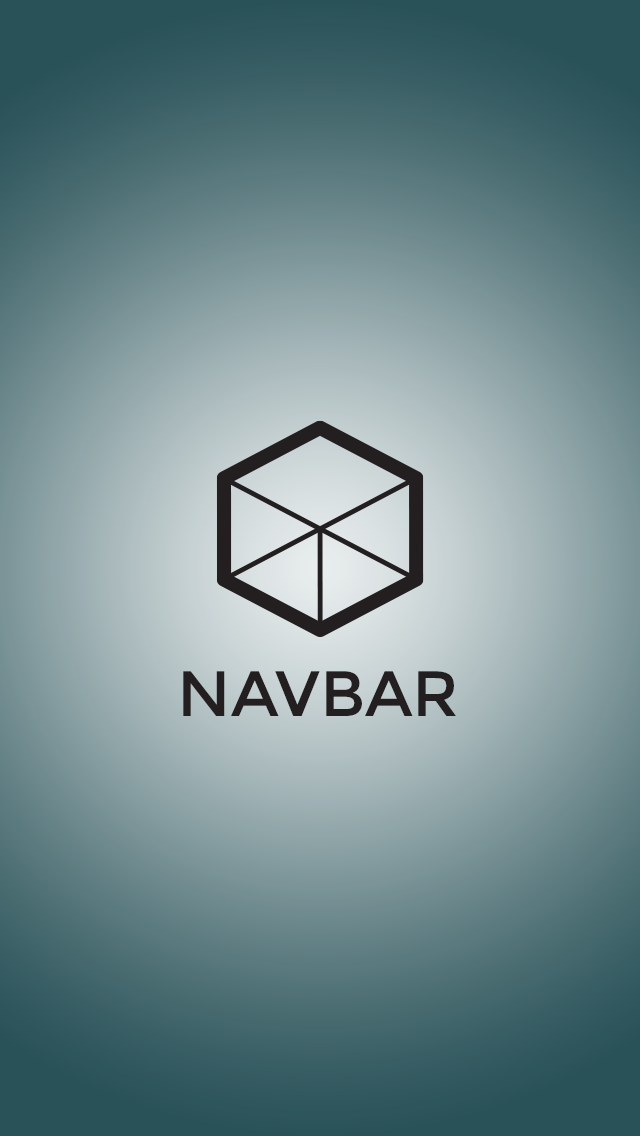
<style>
.page{position:relative;width:640px;height:1136px}
.page>*{position:absolute;margin:0}
.t1{font:64px "Montserrat-Regular";color:#231f20}
</style>
<div class="page">
<p class="t1" style="left:183px;top:671px;width:273px;height:45px">NAVBAR</p>
</div>
